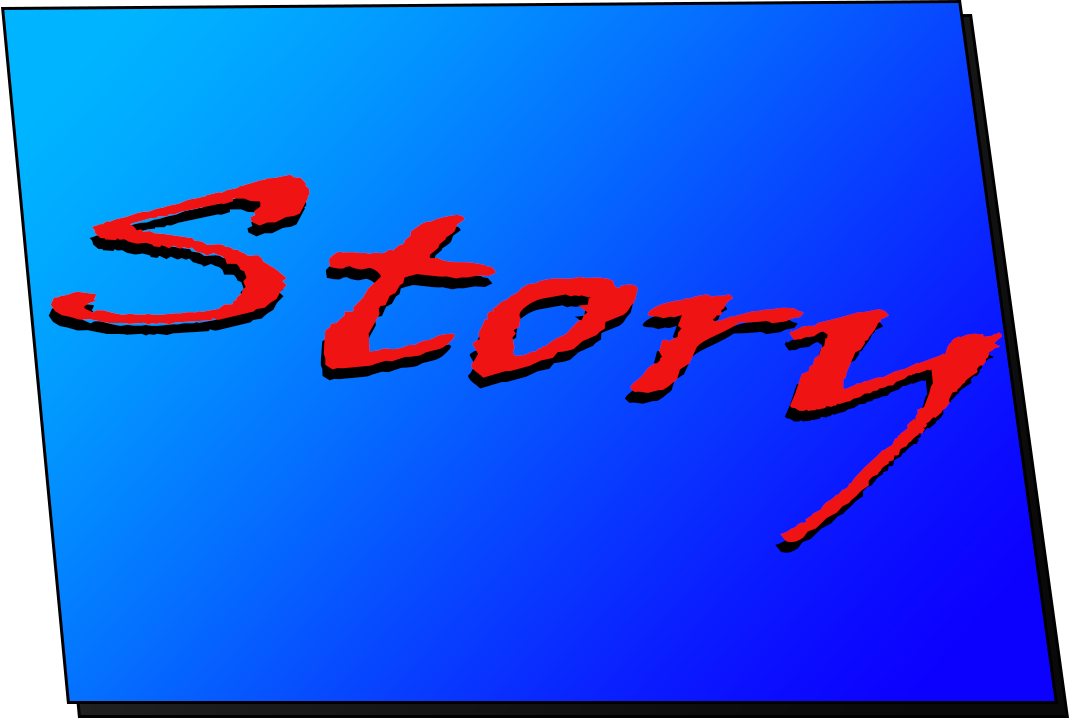
<style>
.page{position:relative;width:1080px;height:720px}
.page>*{position:absolute;margin:0}
.t1{font:232.8px "VinerHandITC";color:#f01313;scale:1.58 1}
.t2{font:232.7px "VinerHandITC";scale:1.58 1}
</style>
<div class="page">
<p class="t1" style="left:50px;top:174px;width:952px;height:368px;rotate:8deg">Story</p>
<p class="t2" style="left:48px;top:185px;width:948px;height:368px;rotate:8deg">Story</p>
</div>
